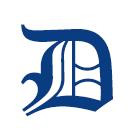
<style>
.page{position:relative;width:134px;height:134px;background:#ffffff}
.page>*{position:absolute;margin:0}
.t1{font:120px "OldEnglishTextMT";color:#0a3c82}
</style>
<div class="page">
<p class="t1" style="left:21px;top:24px;width:92px;height:93px">D</p>
</div>
